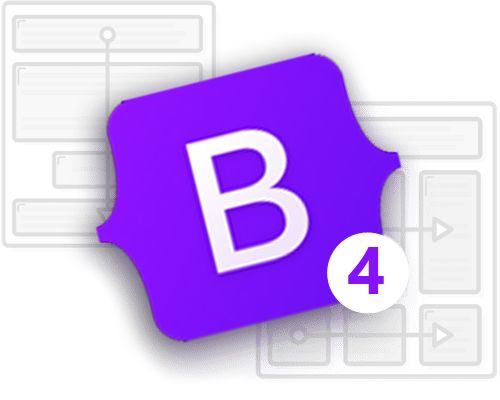
<style>
.page{position:relative;width:500px;height:400px;background:#ffffff}
.page>*{position:absolute;margin:0}
.t1{font:66.7px "NirmalaUI-Bold";color:#8512fb}
</style>
<div class="page">
<p class="t1" style="left:348px;top:247px;width:36px;height:47px">4</p>
</div>
